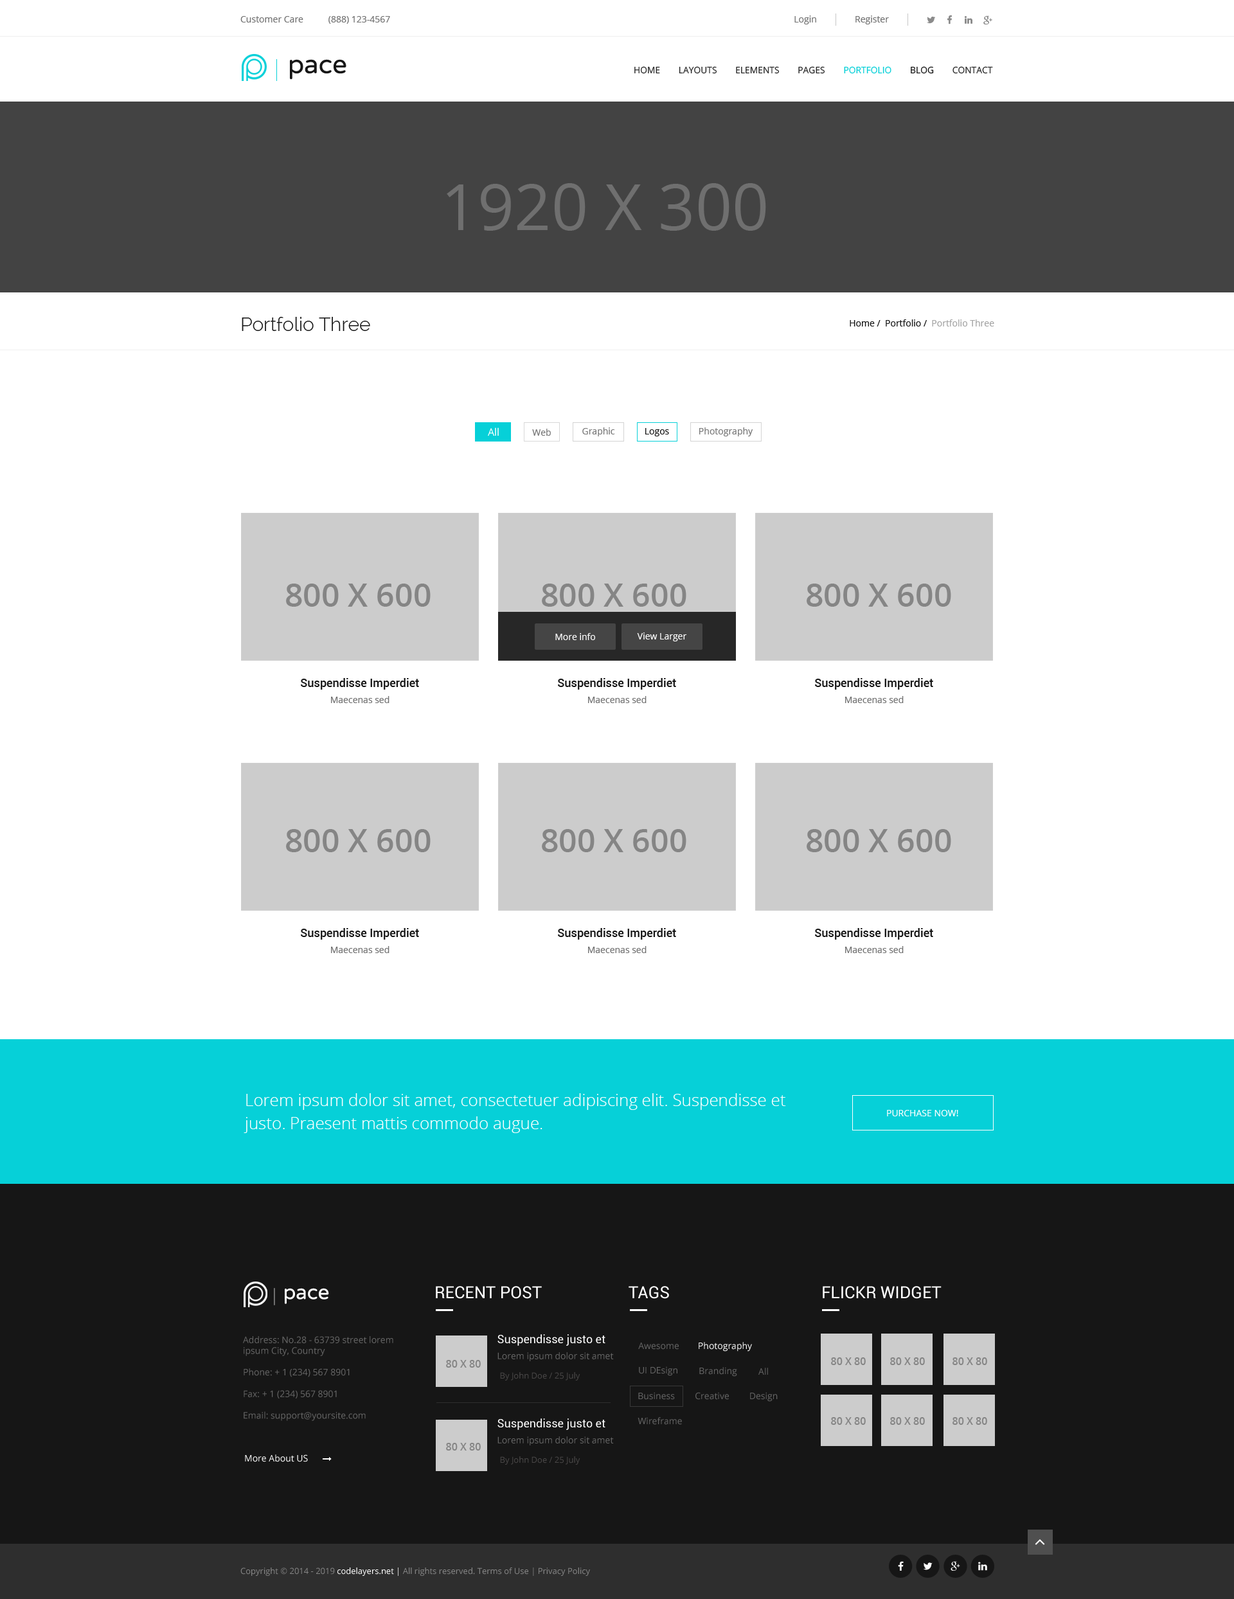
<style>
.page{position:relative;width:1234px;height:1599px;background:#ffffff}
.page>*{position:absolute;margin:0}
.t1{font:9px "OpenSans";color:#727272}
.t2{font:25.7px "VarelaRound-Regular";color:#161616}
.t3{font:9px "OpenSans";color:#272727;text-transform:uppercase}
.t4{font:9px "OpenSans";color:#06d0d8;text-transform:uppercase}
.t5{font:9px "OpenSans";color:#161616;text-transform:uppercase}
.t6{font:64.3px "OpenSans";color:#6f6f6f;text-transform:uppercase}
.t7{font:19.3px "Raleway-Light";color:#161616}
.t8{font:9px "OpenSans";color:#161616}
.t9{font:9px "OpenSans";color:#a4a4a4}
.t10{font:10.3px "OpenSans";color:#ffffff}
.t11{font:9px "OpenSans";color:#787878}
.t12{font:32.1px "OpenSans-Semibold";color:#858585;text-transform:uppercase}
.t13{font:9px "OpenSans";color:#ffffff}
.t14{font:11.6px "Roboto-Medium";color:#161616}
.t15{font:16.7px/23.1px "OpenSans-Light";color:#ffffff}
.t16{font:9px "OpenSans";color:#ffffff;text-transform:uppercase}
.t17{font:20.2px "VarelaRound-Regular";color:#ffffff}
.t18{font:16.7px "Roboto-Regular";color:#ffffff;text-transform:uppercase}
.t19{font:9px "OpenSans";color:#666666}
.t20{font:11.6px "Roboto-Regular";color:#ffffff}
.t21{font:10.3px "OpenSans-Semibold";color:#858585;text-transform:uppercase}
.t22{font:8.4px "OpenSans";color:#494747}
.t23{font:8.4px "OpenSans-Regular";color:#858585}
.t24{font:8.4px "OpenSans-Regular";color:#ffffff}
</style>
<div class="page">
<p class="t1" style="left:240px;top:16px;width:63px;height:6px">Customer Care</p>
<p class="t1" style="left:328px;top:16px;width:62px;height:8px">(888) 123-4567</p>
<p class="t1" style="left:795px;top:15px;width:21px;height:9px">Login</p>
<p class="t1" style="left:856px;top:15px;width:33px;height:9px">Register</p>
<p class="t2" style="left:290px;top:59px;width:56px;height:21px">pace</p>
<p class="t3" style="left:634px;top:66px;width:359px;height:8px">Home        layouts        elements        pages        <span class="t4">portfolio        </span><span class="t5">blog</span>        contact</p>
<p class="t6" style="left:447px;top:183px;width:319px;height:48px">1920 x 300</p>
<p class="t7" style="left:242px;top:317px;width:128px;height:14px">Portfolio Three</p>
<p class="t8" style="left:850px;top:320px;width:145px;height:7px">Home /  Portfolio /  <span class="t9">Portfolio Three</span></p>
<p class="t10" style="left:488px;top:428px;width:11px;height:8px">All</p>
<p class="t11" style="left:532px;top:429px;width:19px;height:7px">Web</p>
<p class="t11" style="left:582px;top:428px;width:33px;height:9px">Graphic</p>
<p class="t8" style="left:645px;top:428px;width:24px;height:9px">Logos</p>
<p class="t11" style="left:699px;top:428px;width:54px;height:9px">Photography</p>
<p class="t12" style="left:286px;top:584px;width:145px;height:23px">800 x 600</p>
<p class="t12" style="left:542px;top:584px;width:145px;height:23px">800 x 600</p>
<p class="t12" style="left:807px;top:584px;width:144px;height:23px">800 x 600</p>
<p class="t13" style="left:555px;top:633px;width:40px;height:7px">More info</p>
<p class="t13" style="left:637px;top:633px;width:50px;height:9px">View Larger</p>
<p class="t14" style="left:301px;top:678px;width:118px;height:12px">Suspendisse Imperdiet</p>
<p class="t14" style="left:558px;top:678px;width:118px;height:12px">Suspendisse Imperdiet</p>
<p class="t14" style="left:815px;top:678px;width:118px;height:12px">Suspendisse Imperdiet</p>
<p class="t1" style="left:331px;top:696px;width:59px;height:7px">Maecenas sed</p>
<p class="t1" style="left:588px;top:696px;width:59px;height:7px">Maecenas sed</p>
<p class="t1" style="left:845px;top:696px;width:59px;height:7px">Maecenas sed</p>
<p class="t12" style="left:286px;top:829px;width:145px;height:23px">800 x 600</p>
<p class="t12" style="left:542px;top:829px;width:145px;height:23px">800 x 600</p>
<p class="t12" style="left:807px;top:829px;width:144px;height:23px">800 x 600</p>
<p class="t14" style="left:301px;top:928px;width:118px;height:12px">Suspendisse Imperdiet</p>
<p class="t14" style="left:558px;top:928px;width:118px;height:12px">Suspendisse Imperdiet</p>
<p class="t14" style="left:815px;top:928px;width:118px;height:12px">Suspendisse Imperdiet</p>
<p class="t1" style="left:331px;top:946px;width:59px;height:7px">Maecenas sed</p>
<p class="t1" style="left:588px;top:946px;width:59px;height:7px">Maecenas sed</p>
<p class="t1" style="left:845px;top:946px;width:59px;height:7px">Maecenas sed</p>
<p class="t15" style="left:244px;top:1094px;width:542px;height:39px">Lorem ipsum dolor sit amet, consectetuer adipiscing elit. Suspendisse et justo. Praesent mattis commodo augue.</p>
<p class="t16" style="left:887px;top:1110px;width:72px;height:7px">Purchase now!</p>
<p class="t17" style="left:285px;top:1288px;width:44px;height:16px">pace</p>
<p class="t18" style="left:436px;top:1286px;width:106px;height:13px">Recent Post</p>
<p class="t18" style="left:629px;top:1286px;width:40px;height:13px">Tags</p>
<p class="t18" style="left:823px;top:1286px;width:119px;height:13px">Flickr Widget</p>
<p class="t19" style="left:243px;top:1336px;width:150px;height:85px">Address: No.28 - 63739 street lorem ipsum City, Country<br><br>Phone: + 1 (234) 567 8901<br><br>Fax: + 1 (234) 567 8901<br><br>Email: support@yoursite.com</p>
<p class="t20" style="left:498px;top:1335px;width:108px;height:11px">Suspendisse justo et</p>
<p class="t19" style="left:638px;top:1343px;width:41px;height:7px">Awesome</p>
<p class="t13" style="left:699px;top:1342px;width:53px;height:10px">Photography</p>
<p class="t21" style="left:446px;top:1360px;width:35px;height:8px">80 x 80</p>
<p class="t19" style="left:498px;top:1353px;width:116px;height:9px">Lorem ipsum dolor sit amet</p>
<p class="t21" style="left:831px;top:1358px;width:35px;height:7px">80 x 80</p>
<p class="t21" style="left:890px;top:1358px;width:35px;height:7px">80 x 80</p>
<p class="t21" style="left:953px;top:1358px;width:34px;height:7px">80 x 80</p>
<p class="t22" style="left:500px;top:1372px;width:80px;height:9px">By John Doe / 25 July</p>
<p class="t19" style="left:639px;top:1367px;width:39px;height:9px">UI DEsign</p>
<p class="t19" style="left:699px;top:1367px;width:38px;height:10px">Branding</p>
<p class="t19" style="left:759px;top:1368px;width:9px;height:7px">All</p>
<p class="t19" style="left:638px;top:1392px;width:37px;height:8px">Business</p>
<p class="t19" style="left:696px;top:1392px;width:33px;height:8px">Creative</p>
<p class="t19" style="left:750px;top:1392px;width:28px;height:10px">Design</p>
<p class="t20" style="left:498px;top:1419px;width:108px;height:11px">Suspendisse justo et</p>
<p class="t19" style="left:638px;top:1418px;width:44px;height:7px">Wireframe</p>
<p class="t21" style="left:831px;top:1418px;width:35px;height:7px">80 x 80</p>
<p class="t21" style="left:890px;top:1418px;width:35px;height:7px">80 x 80</p>
<p class="t21" style="left:953px;top:1418px;width:34px;height:7px">80 x 80</p>
<p class="t21" style="left:446px;top:1443px;width:35px;height:8px">80 x 80</p>
<p class="t19" style="left:498px;top:1437px;width:116px;height:9px">Lorem ipsum dolor sit amet</p>
<p class="t13" style="left:245px;top:1455px;width:63px;height:7px">More About US</p>
<p class="t22" style="left:500px;top:1457px;width:80px;height:8px">By John Doe / 25 July</p>
<p class="t23" style="left:240px;top:1568px;width:350px;height:8px">Copyright © 2014 - 2019 <span class="t24">codelayers.net |</span> All rights reserved. Terms of Use | Privacy Policy</p>
</div>
